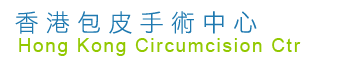
<style>
.page{position:relative;width:342px;height:62px;background:#ffffff}
.page>*{position:absolute;margin:0}
.t1{font:24px "DFHei-Lt-HK-BF";letter-spacing:0.3em;color:#1f79b0}
.t2{font:18.7px "ArialMT";letter-spacing:0.1em;color:#92c800}
</style>
<div class="page">
<p class="t1" style="left:15px;top:11px;width:242px;height:23px">香港包皮手術中心</p>
<p class="t2" style="left:19px;top:38px;width:282px;height:18px">Hong Kong Circumcision Ctr</p>
</div>
